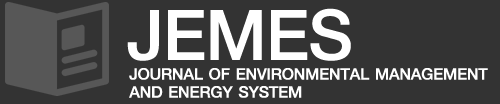
<style>
.page{position:relative;width:500px;height:104px;background:#333333}
.page>*{position:absolute;margin:0}
.t1{font:105.9px "KittithadaMedium65F";letter-spacing:-0.01em;color:#ffffff}
.t2{font:24px/18px "KittithadaMedium65F";letter-spacing:-0.01em;color:#ffffff;text-transform:uppercase}
</style>
<div class="page">
<p class="t1" style="left:127px;top:8px;width:224px;height:53px">JEMES</p>
<p class="t2" style="left:129px;top:68px;width:359px;height:30px">Journal of Environmental Management <br>and Energy System</p>
</div>
